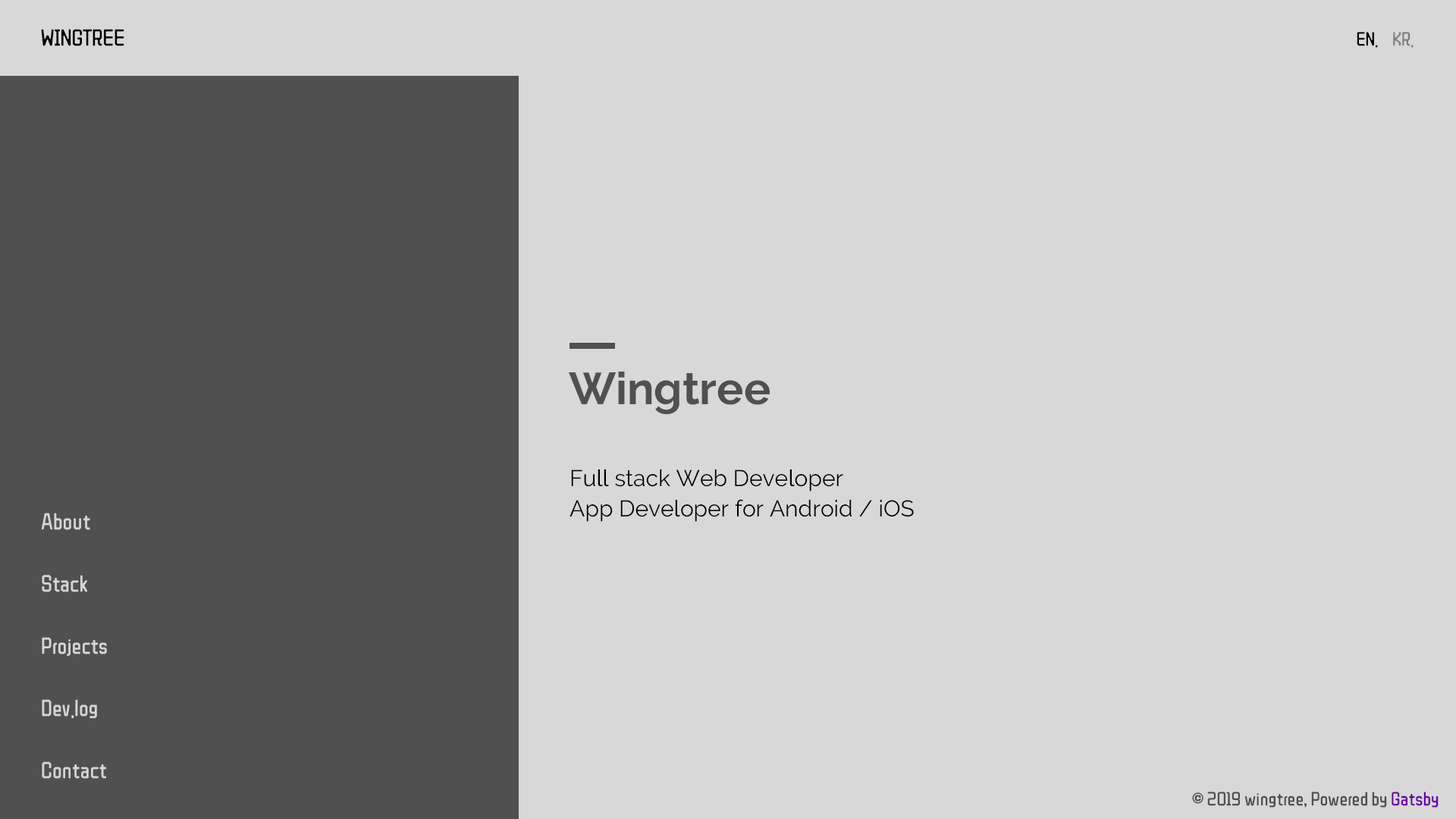
<style>
.page{position:relative;width:1456px;height:819px;background:#d8d8d8}
.page>*{position:absolute;margin:0}
.t1{font:22.7px "ZCOOLQingKeHuangYou-Regular";color:#000000}
.t2{font:19px "ZCOOLQingKeHuangYou-Regular";color:#000000}
.t3{font:19px "ZCOOLQingKeHuangYou-Regular";color:#808080}
.t4{font:44.7px "Raleway-Bold";color:#505050}
.t5{font:22.7px/30.3px "Raleway-Regular";color:#000000}
.t6{font:22.7px "ZCOOLQingKeHuangYou-Regular";color:#d5d5d5}
.t7{font:19px "ZCOOLQingKeHuangYou-Regular";color:#505050}
.t8{font:19px "ZCOOLQingKeHuangYou-Regular";color:#6c00a6}
</style>
<div class="page">
<p class="t1" style="left:41px;top:29px;width:83px;height:17px">WINGTREE</p>
<p class="t2" style="left:1357px;top:32px;width:57px;height:16px">EN.    <span class="t3">KR.</span></p>
<p class="t4" style="left:569px;top:372px;width:201px;height:43px">Wingtree</p>
<p class="t5" style="left:570px;top:469px;width:344px;height:53px">Full stack Web Developer<br>App Developer for Android / iOS</p>
<p class="t6" style="left:42px;top:513px;width:48px;height:17px">About</p>
<p class="t6" style="left:42px;top:575px;width:45px;height:17px">Stack</p>
<p class="t6" style="left:42px;top:637px;width:65px;height:19px">Projects</p>
<p class="t6" style="left:42px;top:699px;width:55px;height:19px">Dev.log</p>
<p class="t6" style="left:42px;top:761px;width:64px;height:18px">Contact</p>
<p class="t7" style="left:1192px;top:792px;width:247px;height:16px">© 2019 wingtree, Powered by <span class="t8">Gatsby</span></p>
</div>
